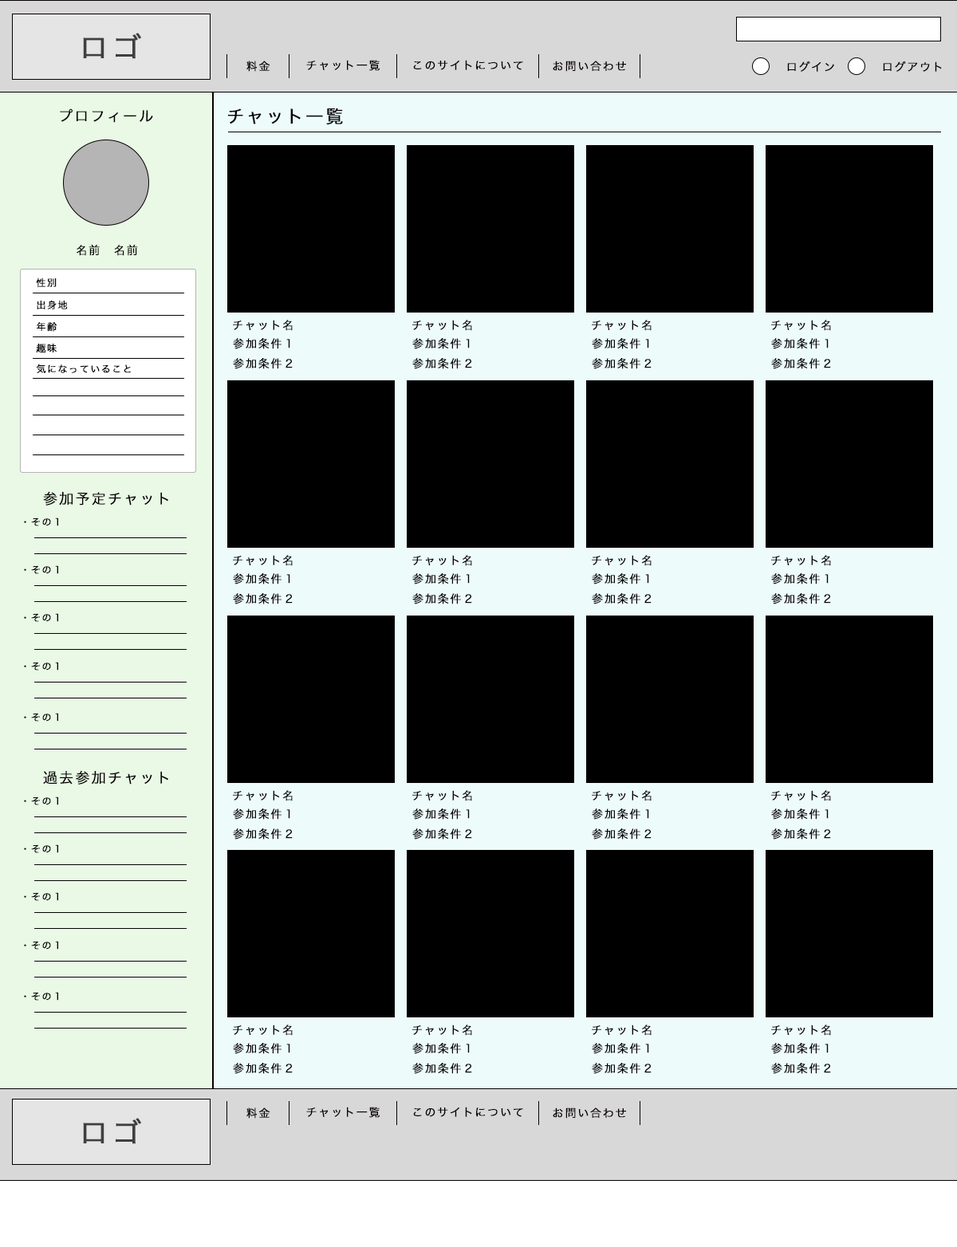
<style>
.page{position:relative;width:957px;height:1247px;background:#000000}
.page>*{position:absolute;margin:0}
.t1{font:28.7px "HiraKakuProN-W3";letter-spacing:0.1em;color:#3f3f40;font-weight:bold}
.t2{font:11.2px "HiraKakuProN-W3";letter-spacing:0.1em;color:#050001;font-weight:bold}
.t3{font:14.3px "HiraKakuProN-W3";letter-spacing:0.1em;color:#050001;font-weight:bold}
.t4{font:17.6px "HiraKakuProN-W3";letter-spacing:0.1em;color:#050001;font-weight:bold}
.t5{font:9.6px "HiraKakuProN-W3";letter-spacing:0.1em;color:#050001;font-weight:bold}
</style>
<div class="page">
<p class="t1" style="left:83px;top:33px;width:58px;height:26px">ロゴ</p>
<p class="t2" style="left:246px;top:61px;width:24px;height:11px">料金</p>
<p class="t2" style="left:306px;top:60px;width:73px;height:11px">チャット一覧</p>
<p class="t2" style="left:413px;top:60px;width:110px;height:10px">このサイトについて</p>
<p class="t2" style="left:552px;top:61px;width:74px;height:11px">お問い合わせ</p>
<p class="t2" style="left:787px;top:61px;width:47px;height:11px">ログイン</p>
<p class="t2" style="left:882px;top:61px;width:59px;height:11px">ログアウト</p>
<p class="t3" style="left:60px;top:108px;width:93px;height:15px">プロフィール</p>
<p class="t4" style="left:227px;top:108px;width:116px;height:16px">チャット一覧</p>
<p class="t2" style="left:77px;top:245px;width:61px;height:11px">名前　名前</p>
<p class="t5" style="left:36px;top:277px;width:21px;height:11px">性別</p>
<p class="t5" style="left:37px;top:300px;width:31px;height:9px">出身地</p>
<p class="t5" style="left:37px;top:322px;width:20px;height:10px">年齢</p>
<p class="t2" style="left:233px;top:320px;width:60px;height:11px">チャット名</p>
<p class="t2" style="left:412px;top:320px;width:60px;height:11px">チャット名</p>
<p class="t2" style="left:591px;top:320px;width:60px;height:11px">チャット名</p>
<p class="t2" style="left:771px;top:320px;width:60px;height:11px">チャット名</p>
<p class="t2" style="left:233px;top:338px;width:57px;height:11px">参加条件１</p>
<p class="t2" style="left:412px;top:338px;width:57px;height:11px">参加条件１</p>
<p class="t2" style="left:591px;top:338px;width:58px;height:11px">参加条件１</p>
<p class="t2" style="left:771px;top:338px;width:57px;height:11px">参加条件１</p>
<p class="t5" style="left:36px;top:344px;width:21px;height:9px">趣味</p>
<p class="t5" style="left:36px;top:363px;width:95px;height:10px">気になっていること</p>
<p class="t2" style="left:233px;top:358px;width:60px;height:11px">参加条件２</p>
<p class="t2" style="left:412px;top:358px;width:60px;height:11px">参加条件２</p>
<p class="t2" style="left:591px;top:358px;width:60px;height:11px">参加条件２</p>
<p class="t2" style="left:771px;top:358px;width:60px;height:11px">参加条件２</p>
<p class="t3" style="left:43px;top:491px;width:125px;height:14px">参加予定チャット</p>
<p class="t5" style="left:24px;top:517px;width:34px;height:9px">・その１</p>
<p class="t2" style="left:233px;top:555px;width:60px;height:11px">チャット名</p>
<p class="t2" style="left:412px;top:555px;width:60px;height:11px">チャット名</p>
<p class="t2" style="left:591px;top:555px;width:60px;height:11px">チャット名</p>
<p class="t2" style="left:771px;top:555px;width:60px;height:11px">チャット名</p>
<p class="t5" style="left:24px;top:565px;width:34px;height:9px">・その１</p>
<p class="t2" style="left:233px;top:573px;width:57px;height:11px">参加条件１</p>
<p class="t2" style="left:412px;top:573px;width:57px;height:11px">参加条件１</p>
<p class="t2" style="left:591px;top:573px;width:58px;height:11px">参加条件１</p>
<p class="t2" style="left:771px;top:573px;width:57px;height:11px">参加条件１</p>
<p class="t2" style="left:233px;top:593px;width:60px;height:11px">参加条件２</p>
<p class="t2" style="left:412px;top:593px;width:60px;height:11px">参加条件２</p>
<p class="t2" style="left:591px;top:593px;width:60px;height:11px">参加条件２</p>
<p class="t2" style="left:771px;top:593px;width:60px;height:11px">参加条件２</p>
<p class="t5" style="left:24px;top:613px;width:34px;height:9px">・その１</p>
<p class="t5" style="left:24px;top:662px;width:34px;height:8px">・その１</p>
<p class="t5" style="left:24px;top:713px;width:34px;height:8px">・その１</p>
<p class="t3" style="left:43px;top:770px;width:125px;height:14px">過去参加チャット</p>
<p class="t5" style="left:24px;top:796px;width:34px;height:9px">・その１</p>
<p class="t2" style="left:233px;top:790px;width:60px;height:11px">チャット名</p>
<p class="t2" style="left:412px;top:790px;width:60px;height:11px">チャット名</p>
<p class="t2" style="left:591px;top:790px;width:60px;height:11px">チャット名</p>
<p class="t2" style="left:771px;top:790px;width:60px;height:11px">チャット名</p>
<p class="t2" style="left:233px;top:808px;width:57px;height:11px">参加条件１</p>
<p class="t2" style="left:412px;top:808px;width:57px;height:11px">参加条件１</p>
<p class="t2" style="left:591px;top:808px;width:58px;height:11px">参加条件１</p>
<p class="t2" style="left:771px;top:808px;width:57px;height:11px">参加条件１</p>
<p class="t2" style="left:233px;top:828px;width:60px;height:11px">参加条件２</p>
<p class="t2" style="left:412px;top:828px;width:60px;height:11px">参加条件２</p>
<p class="t2" style="left:591px;top:828px;width:60px;height:11px">参加条件２</p>
<p class="t2" style="left:771px;top:828px;width:60px;height:11px">参加条件２</p>
<p class="t5" style="left:24px;top:844px;width:34px;height:9px">・その１</p>
<p class="t5" style="left:24px;top:892px;width:34px;height:9px">・その１</p>
<p class="t5" style="left:24px;top:941px;width:34px;height:8px">・その１</p>
<p class="t5" style="left:24px;top:992px;width:34px;height:8px">・その１</p>
<p class="t2" style="left:233px;top:1024px;width:60px;height:11px">チャット名</p>
<p class="t2" style="left:412px;top:1024px;width:60px;height:11px">チャット名</p>
<p class="t2" style="left:591px;top:1024px;width:60px;height:11px">チャット名</p>
<p class="t2" style="left:771px;top:1024px;width:60px;height:11px">チャット名</p>
<p class="t2" style="left:233px;top:1043px;width:57px;height:11px">参加条件１</p>
<p class="t2" style="left:412px;top:1043px;width:57px;height:11px">参加条件１</p>
<p class="t2" style="left:591px;top:1043px;width:58px;height:11px">参加条件１</p>
<p class="t2" style="left:771px;top:1043px;width:57px;height:11px">参加条件１</p>
<p class="t2" style="left:233px;top:1063px;width:60px;height:11px">参加条件２</p>
<p class="t2" style="left:412px;top:1063px;width:60px;height:11px">参加条件２</p>
<p class="t2" style="left:591px;top:1063px;width:60px;height:11px">参加条件２</p>
<p class="t2" style="left:771px;top:1063px;width:60px;height:11px">参加条件２</p>
<p class="t2" style="left:246px;top:1107px;width:24px;height:11px">料金</p>
<p class="t2" style="left:306px;top:1106px;width:73px;height:12px">チャット一覧</p>
<p class="t2" style="left:413px;top:1106px;width:110px;height:11px">このサイトについて</p>
<p class="t2" style="left:552px;top:1107px;width:74px;height:11px">お問い合わせ</p>
<p class="t1" style="left:83px;top:1118px;width:58px;height:26px">ロゴ</p>
</div>
